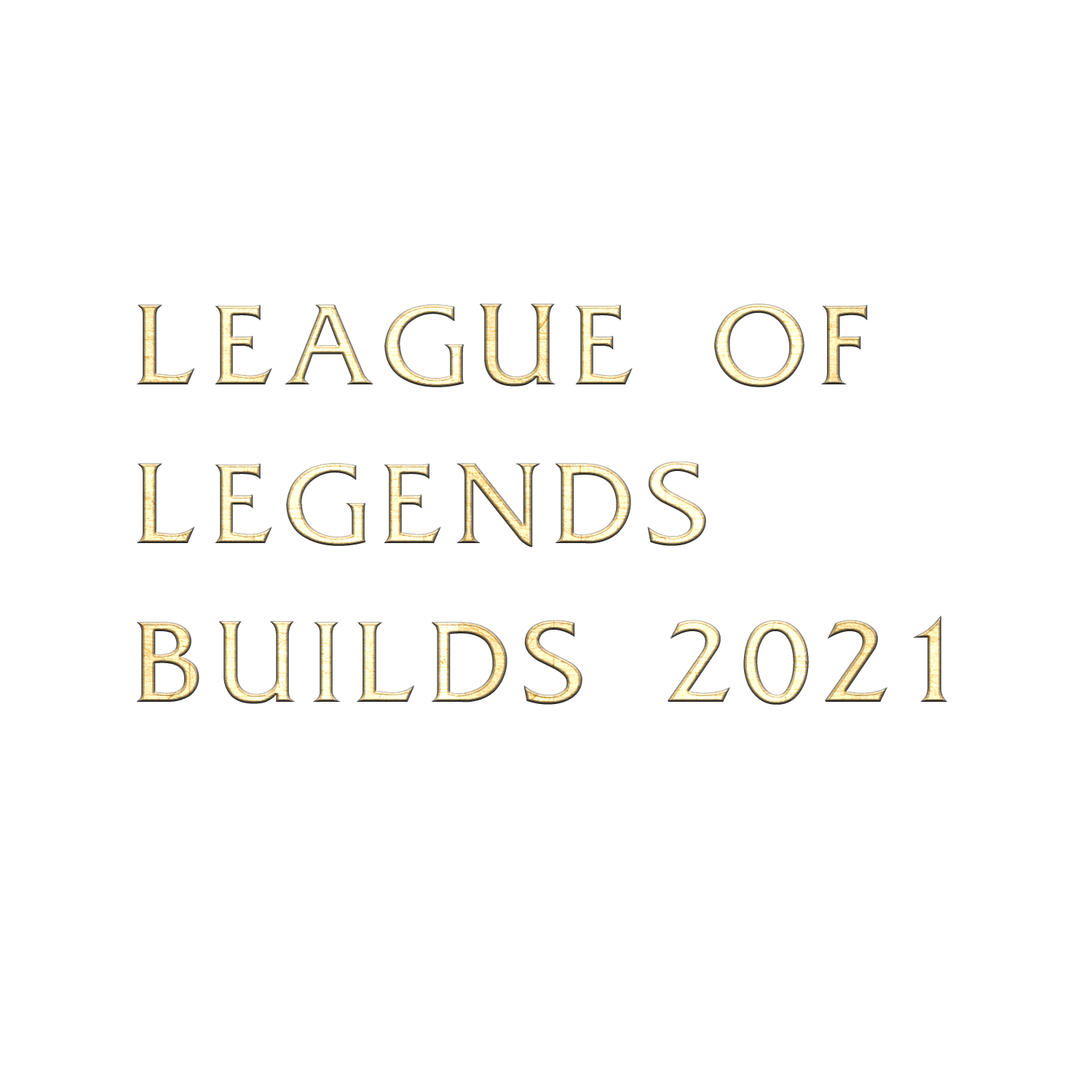
<style>
.page{position:relative;width:1092px;height:1092px;background:#ffffff}
.page>*{position:absolute;margin:0}
.t1{font:132.3px "FrizQuadrata-Thin";letter-spacing:0.05em;font-weight:bold}
</style>
<div class="page">
<p class="t1" style="left:136px;top:304px;width:811px;height:401px">LEAGUE OF<br>LEGENDS<br>BUILDS 2021</p>
</div>
